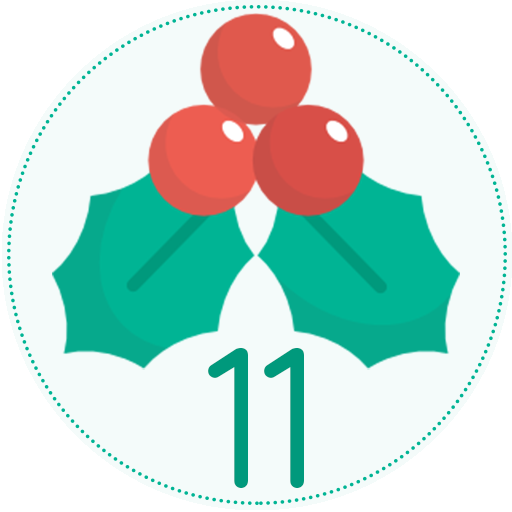
<style>
.page{position:relative;width:512px;height:512px;background:#f4fbfa}
.page>*{position:absolute;margin:0}
.t1{font:220.4px "Antipasto";color:#00997c}
</style>
<div class="page">
<p class="t1" style="left:208px;top:348px;width:96px;height:140px">11</p>
</div>
